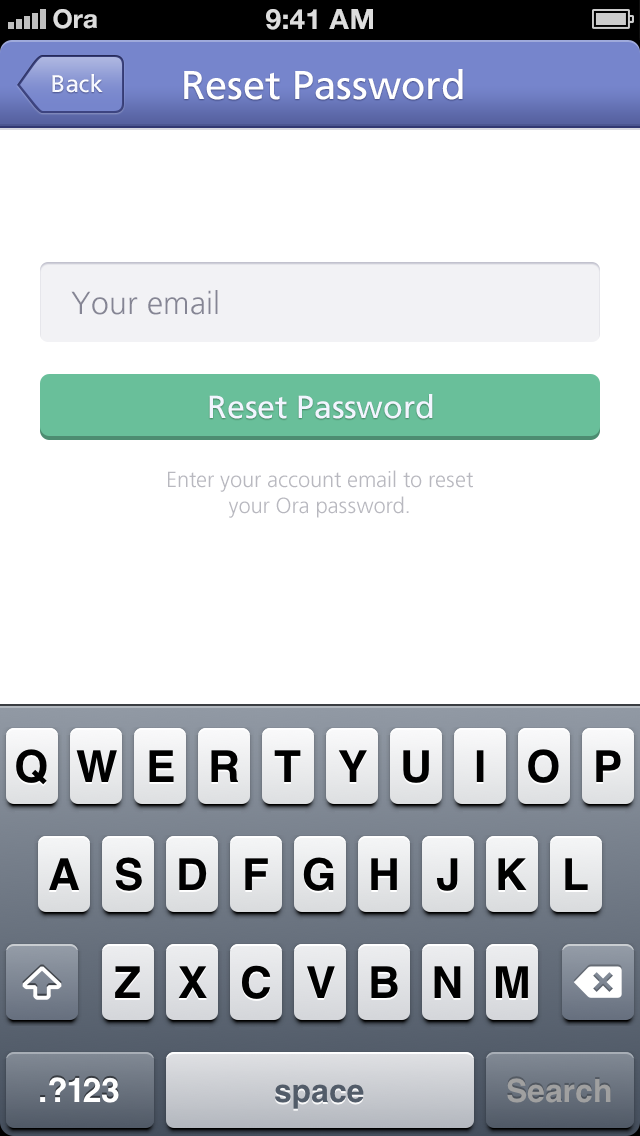
<style>
.page{position:relative;width:640px;height:1136px;background:#ffffff}
.page>*{position:absolute;margin:0}
.t1{font:24px "FrutigerLT-Roman";color:#f2f5ff}
.t2{font:40px "FrutigerLT-Roman";color:#ffffff}
.t3{font:32px "FrutigerLT-Light";color:#858594}
.t4{font:32px "FrutigerLT-Roman";color:#f2f5ff}
.t5{font:22px "FrutigerLT-Light";color:#b8b8bf}
</style>
<div class="page">
<p class="t1" style="left:52px;top:74px;width:51px;height:19px">Back</p>
<p class="t2" style="left:184px;top:69px;width:279px;height:31px">Reset Password</p>
<p class="t3" style="left:71px;top:290px;width:147px;height:25px">Your email</p>
<p class="t4" style="left:209px;top:394px;width:224px;height:25px">Reset Password</p>
<p class="t5" style="left:168px;top:470px;width:305px;height:48px;text-align:center">Enter your account email to reset<br>your Ora password.</p>
</div>
